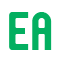
<style>
.page{position:relative;width:60px;height:60px;background:#ffffff}
.page>*{position:absolute;margin:0}
.t1{font:63px "ZillahModernUpper";color:#03af60}
</style>
<div class="page">
<p class="t1" style="left:9px;top:12px;width:43px;height:38px">EA</p>
</div>
